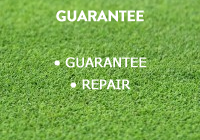
<style>
.page{position:relative;width:200px;height:140px}
.page>*{position:absolute;margin:0}
.t1{font:15px "BrandonGrotesque-Bold";letter-spacing:-0.02em;color:#ffffff;font-weight:bold}
.t2{font:13px/22px "Verdana";letter-spacing:-0.02em;color:#ffffff;font-weight:bold}
</style>
<div class="page">
<p class="t1" style="left:56px;top:10px;width:88px;height:12px">GUARANTEE</p>
<p class="t2" style="left:54px;top:57px;width:93px;height:33px;text-align:center">• GUARANTEE<br>• REPAIR</p>
</div>
